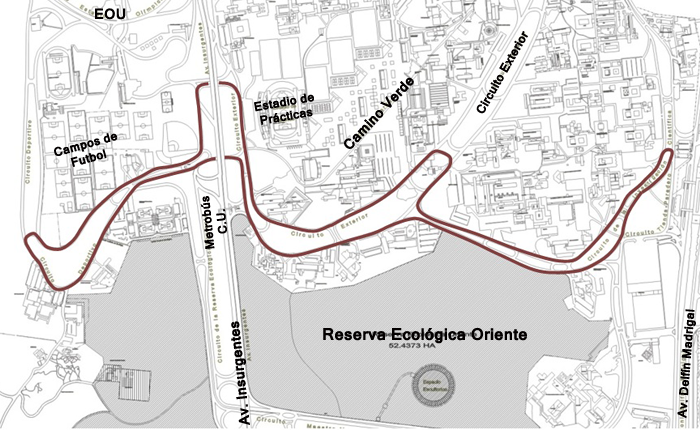
<style>
.page{position:relative;width:700px;height:430px;background:#ffffff}
.page>*{position:absolute;margin:0}
.t1{font:14px "Kartika-Bold";color:#030000}
.t2{font:12px "Kartika-Bold";color:#030000}
.t3{font:16px "Kartika-Bold";color:#030000}
</style>
<div class="page">
<p class="t1" style="left:95px;top:8px;width:31px;height:12px">EOU</p>
<p class="t2" style="left:476px;top:31px;width:52px;height:83px;rotate:-60deg">Circuito Exterior</p>
<p class="t1" style="left:344px;top:77px;width:70px;height:72px;rotate:-47deg">Camino Verde</p>
<p class="t2" style="left:254px;top:93px;width:60px;height:32px;rotate:-10deg">Estadio de<br> Prácticas</p>
<p class="t2" style="left:54px;top:133px;width:64px;height:34px;rotate:-15deg">Campos de<br>    Futbol</p>
<p class="t2" style="left:200px;top:196px;width:27px;height:53px;rotate:-96deg">Metrobús<br>    C.U.</p>
<p class="t2" style="left:677px;top:309px;width:19px;height:110px;rotate:-86deg">Av. Delfín Madrigal</p>
<p class="t1" style="left:231px;top:321px;width:19px;height:104px;rotate:-96deg">Av. Insurgentes</p>
<p class="t3" style="left:323px;top:327px;width:204px;height:17px">Reserva Ecológica Oriente</p>
</div>
